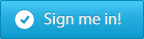
<style>
.page{position:relative;width:144px;height:39px}
.page>*{position:absolute;margin:0}
.t1{font:16.7px "MyriadPro-Regular";letter-spacing:-0.025em;color:#e9e9e9;font-weight:bold}
</style>
<div class="page">
<p class="t1" style="left:44px;top:12px;width:77px;height:16px">Sign me in!</p>
</div>
